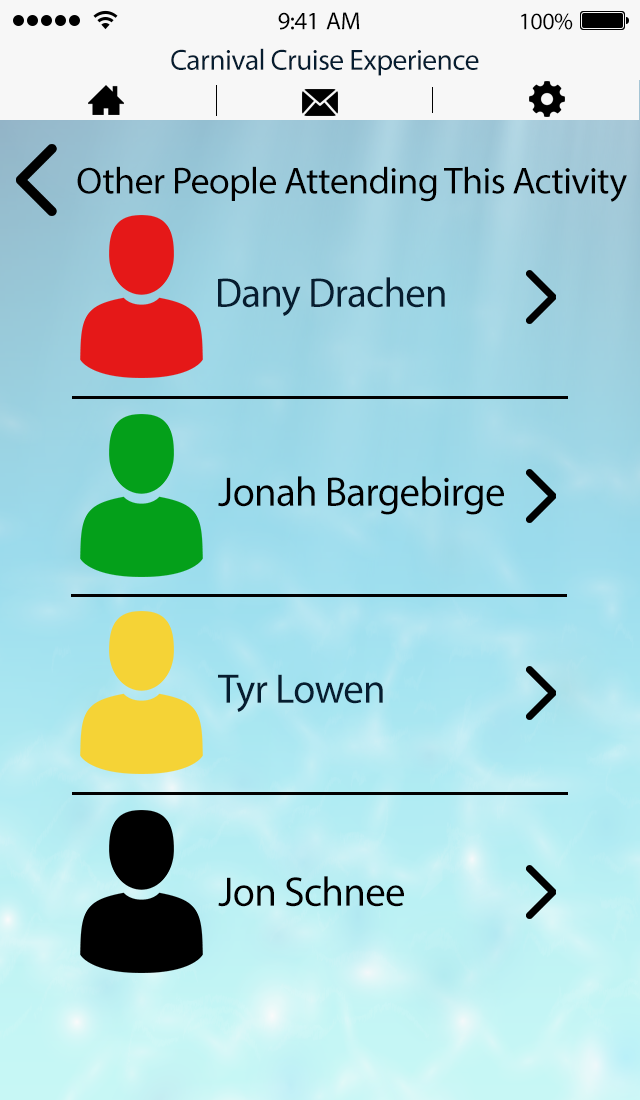
<style>
.page{position:relative;width:640px;height:1100px}
.page>*{position:absolute;margin:0}
.t1{font:25px "MyriadPro-Regular";letter-spacing:-0.02em;color:#000000}
.t2{font:24px "MyriadPro-Regular";letter-spacing:-0.02em;color:#000000}
.t3{font:29.4px "MyriadPro-Regular";letter-spacing:-0.02em;color:#061d30}
.t4{font:37.7px "MyriadPro-Regular";letter-spacing:-0.02em;color:#000000}
.t5{font:41.4px "MyriadPro-Regular";letter-spacing:-0.02em;color:#061d30}
.t6{font:41.4px "MyriadPro-Regular";letter-spacing:-0.02em;color:#000000}
</style>
<div class="page">
<p class="t1" style="left:278px;top:12px;width:82px;height:18px">9:41 AM</p>
<p class="t2" style="left:521px;top:13px;width:52px;height:17px">100%</p>
<p class="t3" style="left:171px;top:48px;width:308px;height:28px">Carnival Cruise Experience</p>
<p class="t4" style="left:77px;top:166px;width:550px;height:36px">Other People Attending This Activity</p>
<p class="t5" style="left:218px;top:277px;width:227px;height:39px">Dany Drachen</p>
<p class="t6" style="left:218px;top:476px;width:286px;height:39px">Jonah Bargebirge</p>
<p class="t5" style="left:218px;top:674px;width:165px;height:38px">Tyr Lowen</p>
<p class="t6" style="left:218px;top:876px;width:186px;height:31px">Jon Schnee</p>
</div>
